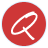
<style>
.page{position:relative;width:48px;height:48px;background:#ce3737}
.page>*{position:absolute;margin:0}
.t1{font:36px "SketchFlowPrint";color:#ffffff}
</style>
<div class="page">
<p class="t1" style="left:11px;top:11px;width:27px;height:29px">Q</p>
</div>
